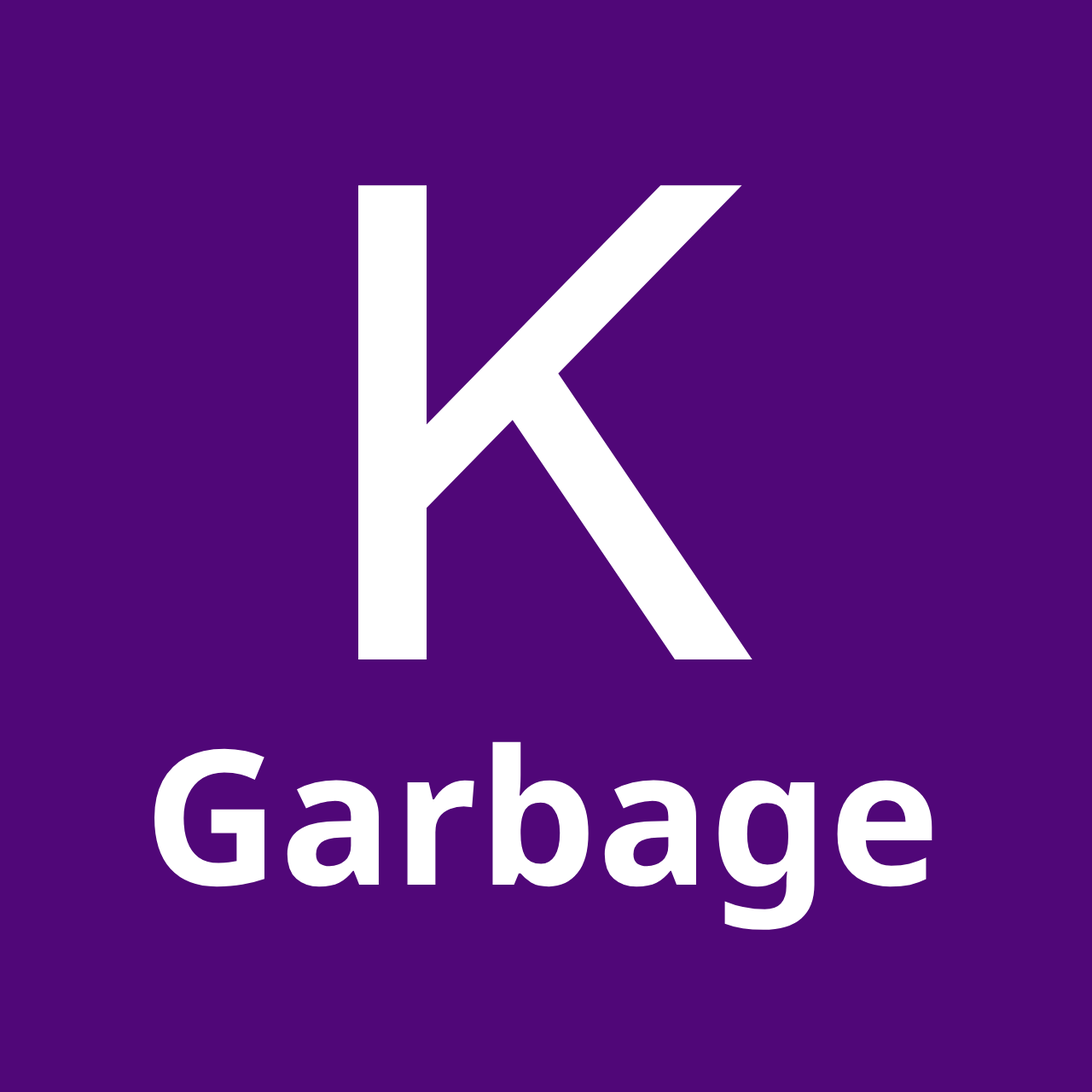
<style>
.page{position:relative;width:1092px;height:1092px;background:#500778}
.page>*{position:absolute;margin:0}
.t1{font:187.7px "NotoSans-Bold";color:#ffffff}
.t2{font:682.5px "CMUBright-SemiBold";color:#ffffff}
</style>
<div class="page">
<p class="t1" style="left:154px;top:185px;width:778px;height:745px;text-align:center"><span class="t2">K<br></span>Garbage</p>
</div>
